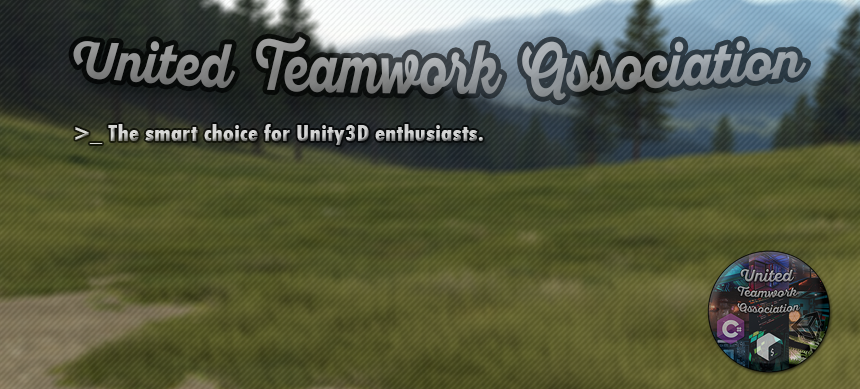
<style>
.page{position:relative;width:860px;height:389px}
.page>*{position:absolute;margin:0}
.t1{font:48px "SantEliaScript-BoldDMO"}
.t2{font:24px "TwCenMT-CondensedExtraBold"}
</style>
<div class="page">
<p class="t1" style="left:73px;top:36px;width:734px;height:65px">United  Teamwork  Association</p>
<p class="t2" style="left:75px;top:124px;width:408px;height:21px">&gt;_ The smart choice for Unity3D enthusiasts.</p>
</div>
